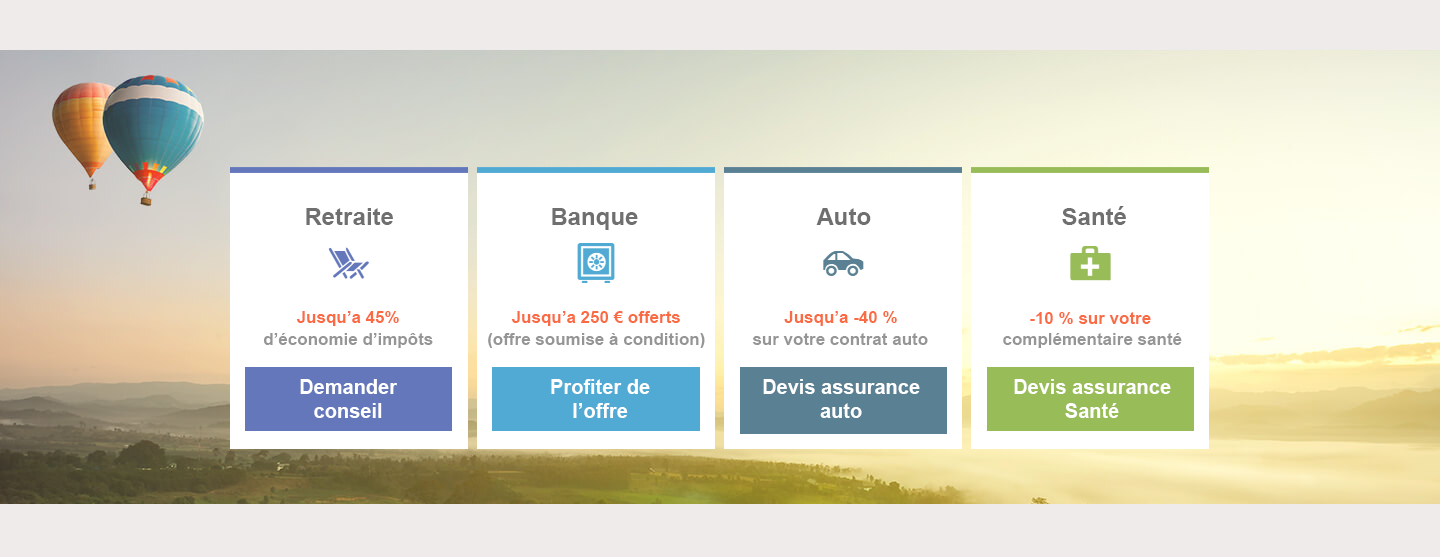
<style>
.page{position:relative;width:1440px;height:557px;background:#ffffff}
.page>*{position:absolute;margin:0}
.t1{font:24px "Arial-BoldMT";color:#6f6f6f}
.t2{font:17px "Arial-BoldMT";color:#fa6a43}
.t3{font:17px "Arial-BoldMT";color:#959595}
.t4{font:20px "Arial-BoldMT";color:#ffffff}
</style>
<div class="page">
<p class="t1" style="left:306px;top:208px;width:87px;height:17px">Retraite</p>
<p class="t1" style="left:552px;top:208px;width:86px;height:22px">Banque</p>
<p class="t1" style="left:816px;top:208px;width:55px;height:17px">Auto</p>
<p class="t1" style="left:1062px;top:206px;width:64px;height:19px">Santé</p>
<p class="t2" style="left:297px;top:311px;width:102px;height:15px">Jusqu’a 45%</p>
<p class="t2" style="left:512px;top:311px;width:168px;height:15px">Jusqu’a 250 € offerts</p>
<p class="t2" style="left:784px;top:311px;width:113px;height:15px">Jusqu’a -40 %</p>
<p class="t2" style="left:1030px;top:312px;width:121px;height:12px">-10 % sur votre</p>
<p class="t3" style="left:264px;top:333px;width:169px;height:15px">d’économie d’impôts</p>
<p class="t3" style="left:488px;top:333px;width:217px;height:15px">(offre soumise à condition)</p>
<p class="t3" style="left:752px;top:333px;width:176px;height:12px">sur votre contrat auto</p>
<p class="t3" style="left:1003px;top:333px;width:179px;height:15px">complémentaire santé</p>
<p class="t4" style="left:300px;top:379px;width:97px;height:39px;text-align:center">Demander<br>conseil</p>
<p class="t4" style="left:551px;top:379px;width:99px;height:39px;text-align:center">Profiter de<br>l’offre</p>
<p class="t4" style="left:763px;top:379px;width:157px;height:39px;text-align:center">Devis assurance auto</p>
<p class="t4" style="left:1014px;top:379px;width:157px;height:39px;text-align:center">Devis assurance Santé</p>
</div>
